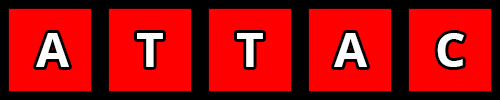
<style>
.page{position:relative;width:500px;height:100px;background:#ff0000}
.page>*{position:absolute;margin:0}
.t1{font:48px "OpenSans-Bold";color:#fefefe}
</style>
<div class="page">
<p class="t1" style="left:36px;top:33px;width:33px;height:34px">A</p>
<p class="t1" style="left:137px;top:33px;width:26px;height:34px">T</p>
<p class="t1" style="left:237px;top:33px;width:26px;height:34px">T</p>
<p class="t1" style="left:334px;top:33px;width:33px;height:34px">A</p>
<p class="t1" style="left:437px;top:33px;width:27px;height:34px">C</p>
</div>
